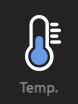
<style>
.page{position:relative;width:78px;height:104px;background:#232323}
.page>*{position:absolute;margin:0}
.t1{font:14px "SegoeUI";color:#7c7c7c;font-weight:bold}
</style>
<div class="page">
<p class="t1" style="left:19px;top:82px;width:39px;height:14px">Temp.</p>
</div>
